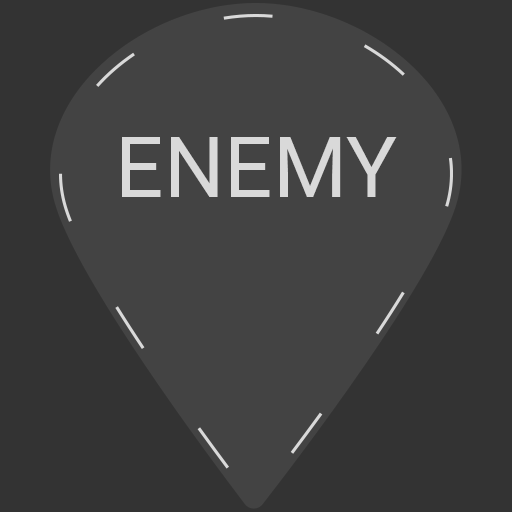
<style>
.page{position:relative;width:512px;height:512px;background:#333333}
.page>*{position:absolute;margin:0}
.t1{font:85px "Roboto-Regular";color:#d9d9d9}
</style>
<div class="page">
<p class="t1" style="left:122px;top:137px;width:275px;height:60px">ENEMY</p>
</div>
